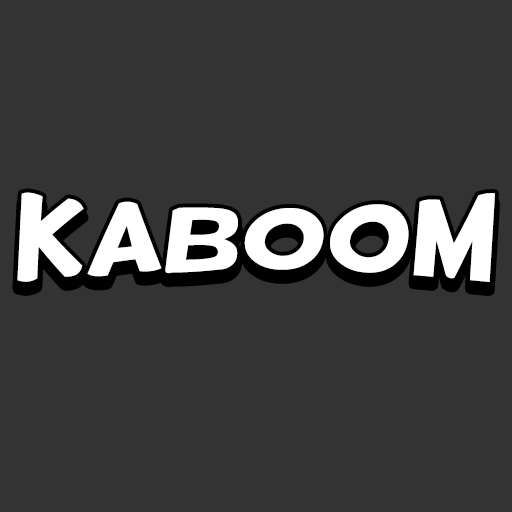
<style>
.page{position:relative;width:512px;height:512px;background:#333333}
.page>*{position:absolute;margin:0}
.t1{font:118.8px "Helsinki";color:#ffffff}
</style>
<div class="page">
<p class="t1" style="left:17px;top:192px;width:478px;height:90px">KABOOM</p>
</div>
